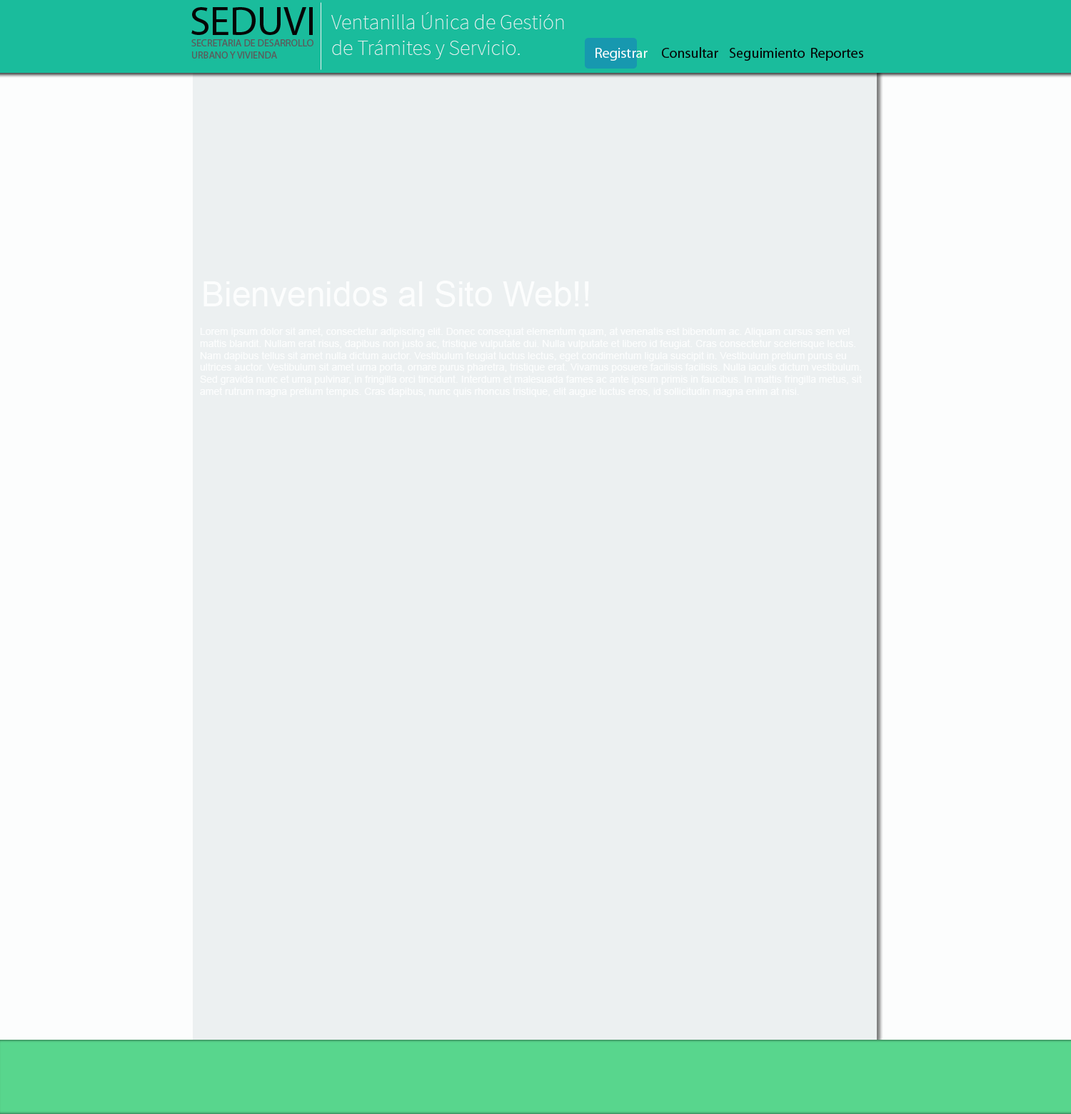
<style>
.page{position:relative;width:1071px;height:1114px;background:#ecf0f1}
.page>*{position:absolute;margin:0}
.t1{font:40.7px "MyriadPro-Regular";color:#050505}
.t2{font:21.4px/4.3px "SourceSansPro-ExtraLight";color:#ecf0f1}
.t3{font:21.4px "SourceSansPro-ExtraLight";color:#ecf0f1}
.t4{font:10px "MyriadPro-Regular";color:#5b5b5b}
.t5{font:14.3px "MyriadPro-Regular";color:#fdfcfc}
.t6{font:14.3px "MyriadPro-Regular";color:#050505}
.t7{font:34.3px "ArialMT";color:#fcfdfd}
.t8{font:10px "ArialMT";color:#fcfdfd}
</style>
<div class="page">
<p class="t1" style="left:191px;top:7px;width:122px;height:28px">SEDUVI</p>
<p class="t2" style="left:331px;top:12px;width:233px;height:47px"><span class="t3">Ventanilla Única d</span>e Gestión <br>de Trámites y Servicio<span class="t3">.</span></p>
<p class="t4" style="left:191px;top:39px;width:122px;height:20px">SECRETARIA DE DESARROLLO<br>URBANO Y VIVIENDA</p>
<p class="t5" style="left:595px;top:48px;width:52px;height:13px">Registrar</p>
<p class="t6" style="left:662px;top:47px;width:56px;height:11px">Consultar</p>
<p class="t6" style="left:730px;top:48px;width:75px;height:13px">Seguimiento</p>
<p class="t6" style="left:811px;top:48px;width:52px;height:13px">Reportes</p>
<p class="t7" style="left:203px;top:281px;width:386px;height:26px">Bienvenidos al Sito Web!!</p>
<p class="t8" style="left:200px;top:327px;width:662px;height:70px">Lorem ipsum dolor sit amet, consectetur adipiscing elit. Donec consequat elementum quam, at venenatis est bibendum ac. Aliquam cursus sem vel mattis blandit. Nullam erat risus, dapibus non justo ac, tristique vulputate dui. Nulla vulputate et libero id feugiat. Cras consectetur scelerisque lectus. Nam dapibus tellus sit amet nulla dictum auctor. Vestibulum feugiat luctus lectus, eget condimentum ligula suscipit in. Vestibulum pretium purus eu ultrices auctor. Vestibulum sit amet urna porta, ornare purus pharetra, tristique erat. Vivamus posuere facilisis facilisis. Nulla iaculis dictum vestibulum. Sed gravida nunc et urna pulvinar, in fringilla orci tincidunt. Interdum et malesuada fames ac ante ipsum primis in faucibus. In mattis fringilla metus, sit amet rutrum magna pretium tempus. Cras dapibus, nunc quis rhoncus tristique, elit augue luctus eros, id sollicitudin magna enim at nisi.</p>
</div>
